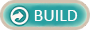
<style>
.page{position:relative;width:90px;height:30px}
.page>*{position:absolute;margin:0}
.t1{font:18px "Calibri";color:#fefefe}
</style>
<div class="page">
<p class="t1" style="left:34px;top:10px;width:44px;height:11px">BUILD</p>
</div>
